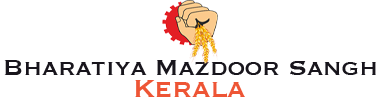
<style>
.page{position:relative;width:380px;height:98px;background:#ffffff}
.page>*{position:absolute;margin:0}
.t1{font:29.1px "Copperplate";letter-spacing:-0.015em;color:#18151c}
.t2{font:33.1px "Copperplate";letter-spacing:-0.02em;color:#ee5535}
</style>
<div class="page">
<p class="t1" style="left:4px;top:60px;width:372px;height:15px">Bharatiya Mazdoor Sangh</p>
<p class="t2" style="left:135px;top:80px;width:110px;height:17px">Kerala</p>
</div>
